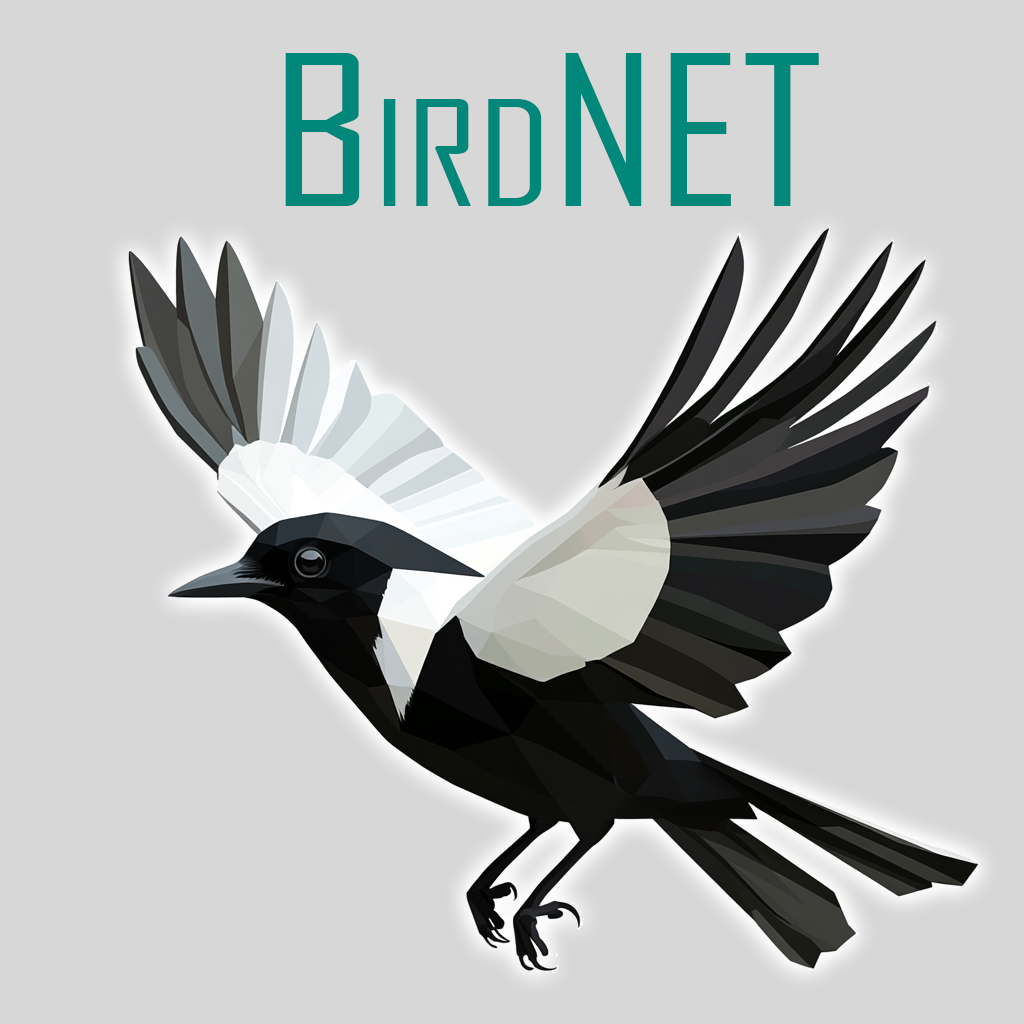
<style>
.page{position:relative;width:1024px;height:1024px;background:#d7d7d7}
.page>*{position:absolute;margin:0}
.t1{font:200px "AgencyFB-Reg";color:#02887b;font-variant:small-caps;scale:1.2 1}
</style>
<div class="page">
<p class="t1" style="left:285px;top:53px;width:534px;height:153px">BirdNET</p>
</div>
